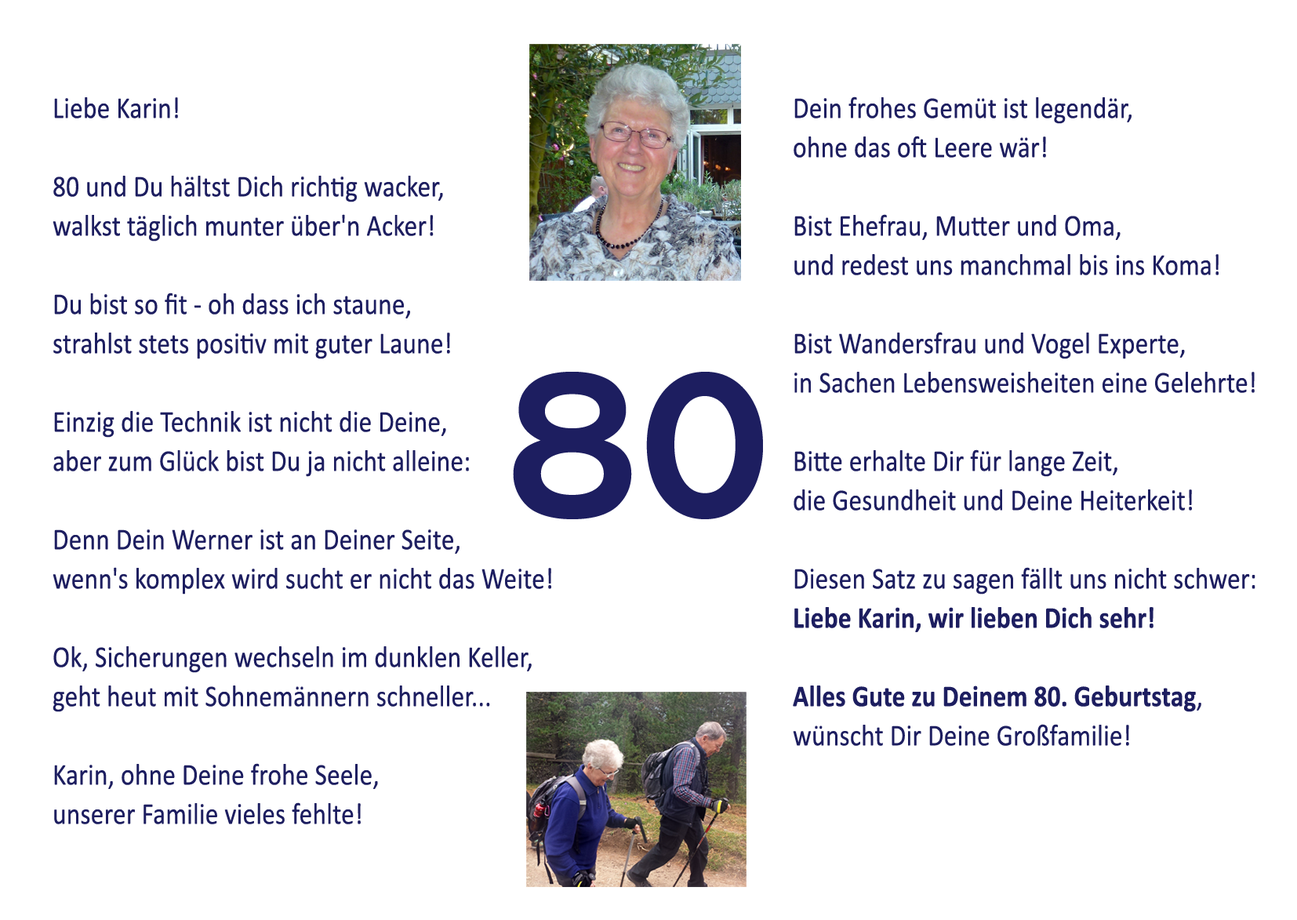
<style>
.page{position:relative;width:1297px;height:920px;background:#ffffff}
.page>*{position:absolute;margin:0}
.t1{font:30.3px/39.2px "Calibri";letter-spacing:0.007em;color:#1d1e60;scale:0.86 1}
.t2{font:30.3px/39.2px "Calibri-Bold";letter-spacing:0.007em;color:#1d1e60;scale:0.86 1}
.t3{font:213.4px "CopperplateGothic-Bold";letter-spacing:0.007em;color:#1d1e60;scale:0.86 1}
</style>
<div class="page">
<p class="t1" style="left:53px;top:97px;width:498px;height:727px">Liebe Karin!<br><br>80 und Du hältst Dich richtig wacker,<br>walkst täglich munter über'n Acker!<br><br>Du bist so fit - oh dass ich staune,<br>strahlst stets positiv mit guter Laune!<br><br>Einzig die Technik ist nicht die Deine,<br>aber zum Glück bist Du ja nicht alleine:<br><br>Denn Dein Werner ist an Deiner Seite,<br>wenn's komplex wird sucht er nicht das Weite!<br><br>Ok, Sicherungen wechseln im dunklen Keller,<br>geht heut mit Sohnemännern schneller...<br><br>Karin, ohne Deine frohe Seele,<br>unserer Familie vieles fehlte!</p>
<p class="t1" style="left:793px;top:96px;width:462px;height:650px">Dein frohes Gemüt ist legendär,<br>ohne das oft Leere wär!<br><br>Bist Ehefrau, Mutter und Oma,<br>und redest uns manchmal bis ins Koma!<br><br>Bist Wandersfrau und Vogel Experte,<br>in Sachen Lebensweisheiten eine Gelehrte!<br><br>Bitte erhalte Dir für lange Zeit,<br>die Gesundheit und Deine Heiterkeit!<br><br>Diesen Satz zu sagen fällt uns nicht schwer:<br><span class="t2">Liebe Karin, wir lieben Dich sehr!<br><br>Alles Gute zu Deinem 80. Geburtstag</span>,<br>wünscht Dir Deine Großfamilie!</p>
<p class="t3" style="left:513px;top:372px;width:250px;height:147px">80</p>
</div>
